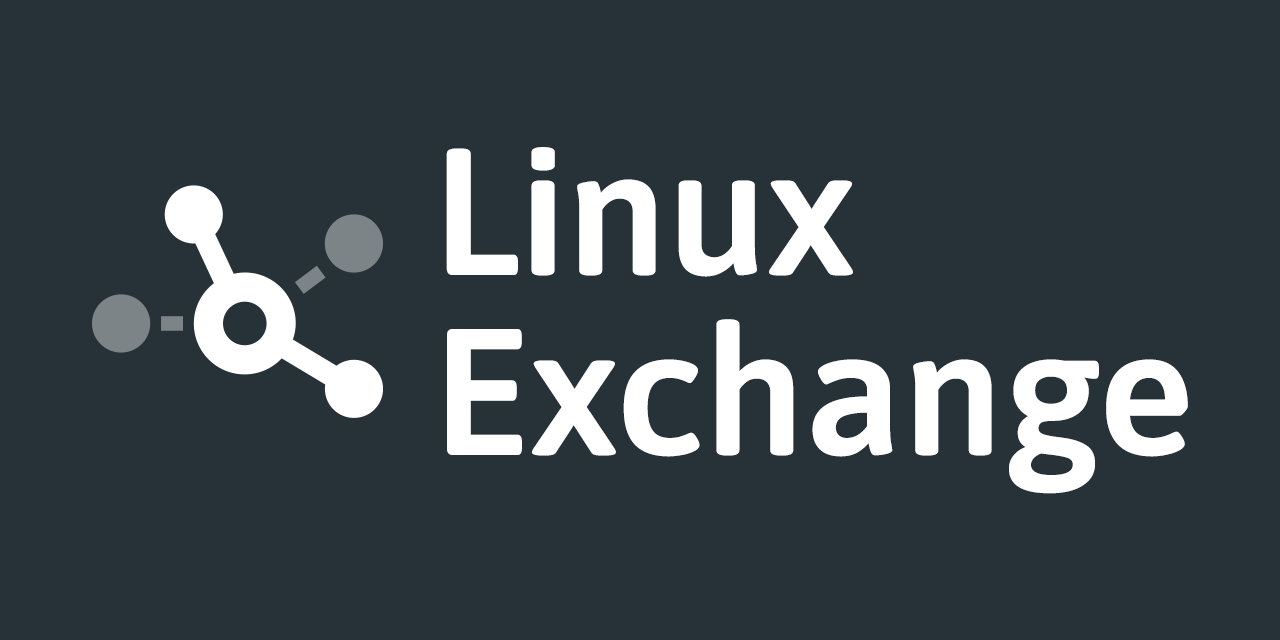
<style>
.page{position:relative;width:1280px;height:640px;background:#263238}
.page>*{position:absolute;margin:0}
.t1{font:180px/180px "Asap-SemiBold";color:#ffffff}
</style>
<div class="page">
<p class="t1" style="left:446px;top:147px;width:742px;height:347px">Linux<br>Exchange</p>
</div>
